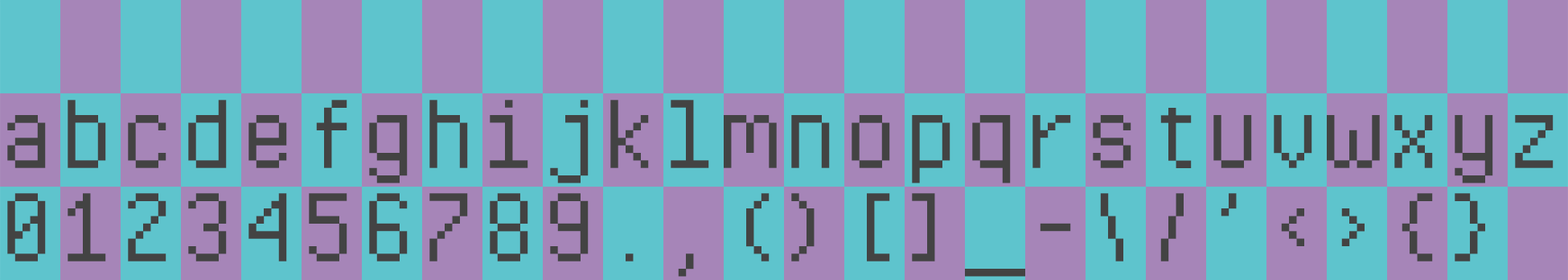
<style>
.page{position:relative;width:1568px;height:280px;background:#a685b8}
.page>*{position:absolute;margin:0}
.t1{font:120.6px "PixelOperatorMono";color:#434343}
</style>
<div class="page">
<p class="t1" style="left:7px;top:100px;width:1547px;height:83px">abcdefghijklmnopqrstuvwxyz</p>
<p class="t1" style="left:7px;top:193px;width:1478px;height:84px">0123456789.,()[]_-\/’&lt;&gt;{}</p>
</div>
